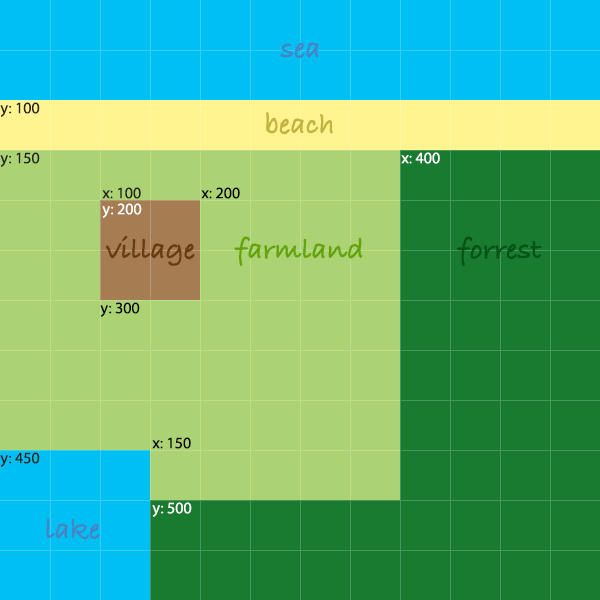
<style>
.page{position:relative;width:600px;height:600px;background:#acd373}
.page>*{position:absolute;margin:0}
.t1{font:30px "BradleyHandITCTT-Bold";color:#4386c7}
.t2{font:16px "MyriadPro-Regular";color:#202020}
.t3{font:30px "BradleyHandITCTT-Bold";color:#c1b441}
.t4{font:16px "MyriadPro-Regular";color:#ffffff}
.t5{font:16px "MyriadPro-Regular";color:#000000}
.t6{font:30px "BradleyHandITCTT-Bold";color:#693b0d}
.t7{font:30px "BradleyHandITCTT-Bold";color:#65a408}
.t8{font:30px "BradleyHandITCTT-Bold";color:#055317}
</style>
<div class="page">
<p class="t1" style="left:280px;top:42px;width:39px;height:17px">sea</p>
<p class="t2" style="left:0px;top:102px;width:40px;height:15px">y: 100</p>
<p class="t3" style="left:266px;top:112px;width:67px;height:23px">beach</p>
<p class="t2" style="left:0px;top:152px;width:40px;height:15px">y: 150</p>
<p class="t4" style="left:401px;top:152px;width:39px;height:12px">x: 400</p>
<p class="t2" style="left:102px;top:187px;width:39px;height:12px">x: 100</p>
<p class="t5" style="left:201px;top:187px;width:39px;height:12px">x: 200</p>
<p class="t4" style="left:102px;top:203px;width:40px;height:15px">y: 200</p>
<p class="t6" style="left:105px;top:235px;width:90px;height:31px">village</p>
<p class="t7" style="left:234px;top:236px;width:129px;height:31px">farmland</p>
<p class="t8" style="left:456px;top:236px;width:86px;height:31px">forrest</p>
<p class="t5" style="left:100px;top:302px;width:40px;height:15px">y: 300</p>
<p class="t5" style="left:152px;top:437px;width:39px;height:12px">x: 150</p>
<p class="t2" style="left:0px;top:452px;width:40px;height:15px">y: 450</p>
<p class="t4" style="left:152px;top:502px;width:40px;height:15px">y: 500</p>
<p class="t1" style="left:46px;top:518px;width:54px;height:22px">lake</p>
</div>
